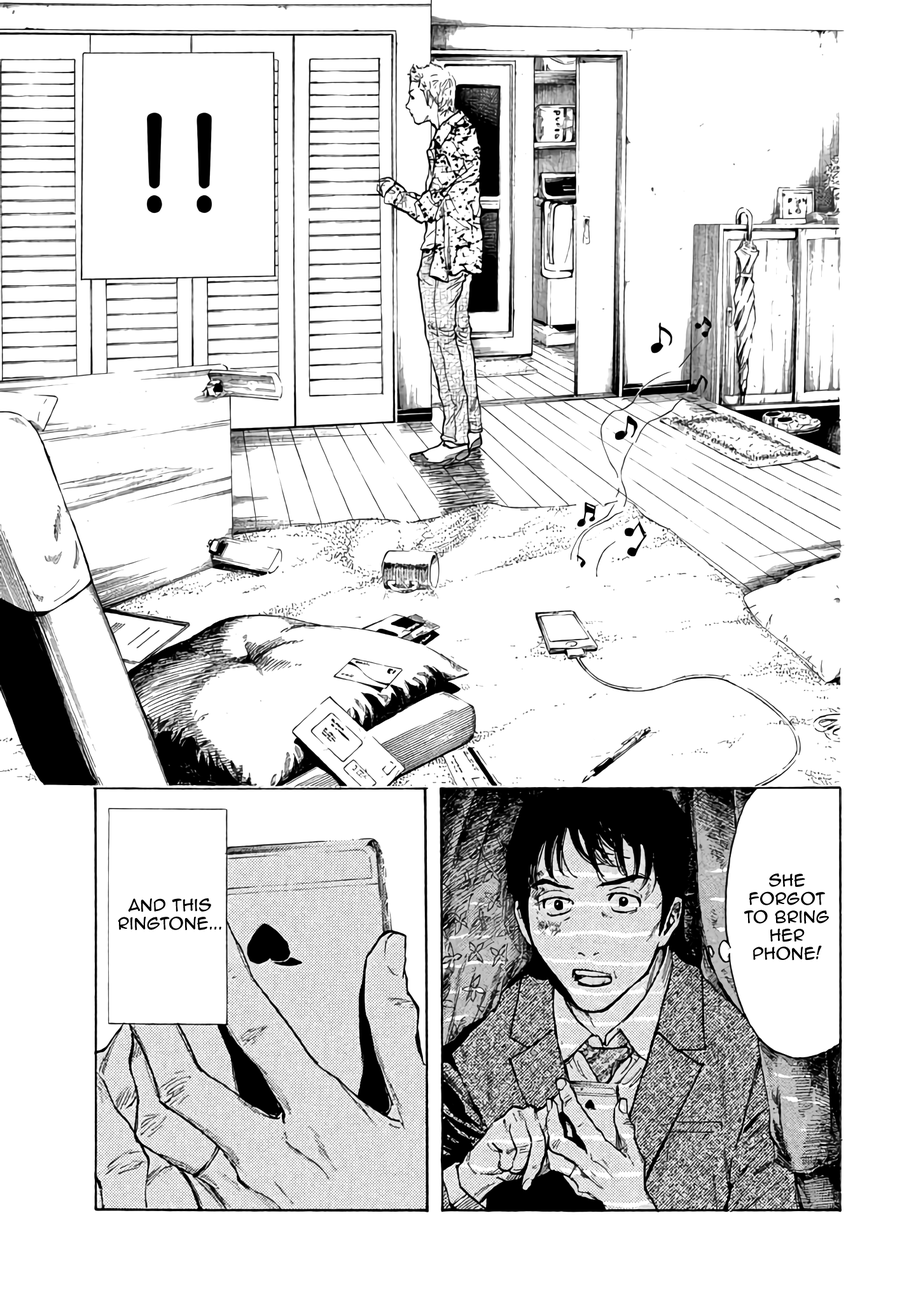
<style>
.page{position:relative;width:916px;height:1302px;background:#ffffff}
.page>*{position:absolute;margin:0}
.t1{font:15.3px "AnimeAce2.0BB";color:#000000}
</style>
<div class="page">
<p class="t1" style="left:744px;top:874px;width:85px;height:87px;text-align:center">She forgot to bring her phone!</p>
<p class="t1" style="left:118px;top:898px;width:103px;height:32px;text-align:center">and this ringtone...</p>
</div>
